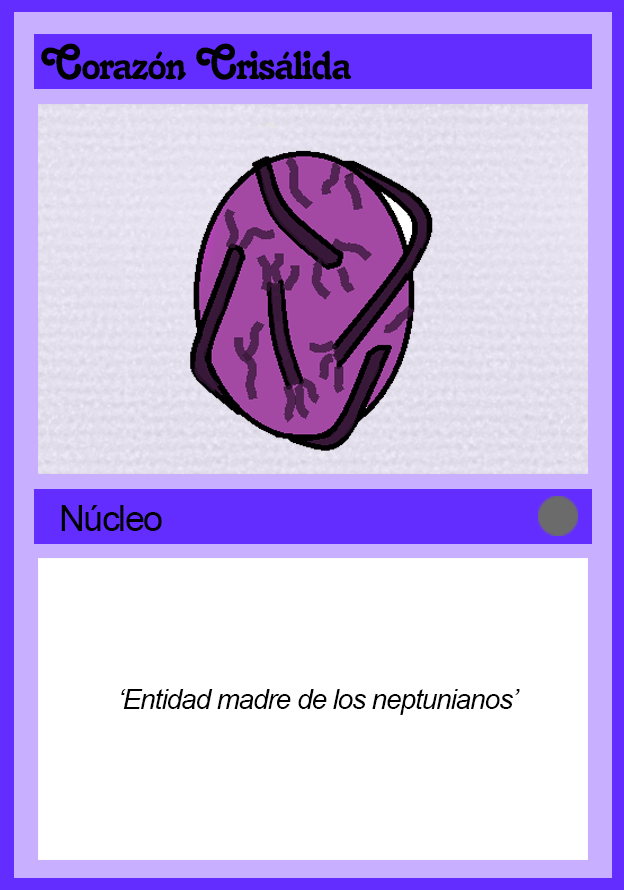
<style>
.page{position:relative;width:624px;height:890px;background:#ffffff}
.page>*{position:absolute;margin:0}
.t1{font:48px "Salina";letter-spacing:-0.04em;color:#000000}
.t2{font:36px "ArialMT";letter-spacing:-0.04em;color:#000000}
.t3{font:28px "Arial-ItalicMT";letter-spacing:-0.04em;color:#000000}
</style>
<div class="page">
<p class="t1" style="left:41px;top:43px;width:311px;height:37px">Corazón Crisálida</p>
<p class="t2" style="left:61px;top:505px;width:101px;height:26px">Núcleo</p>
<p class="t3" style="left:121px;top:689px;width:399px;height:26px">‘Entidad madre de los neptunianos’</p>
</div>
